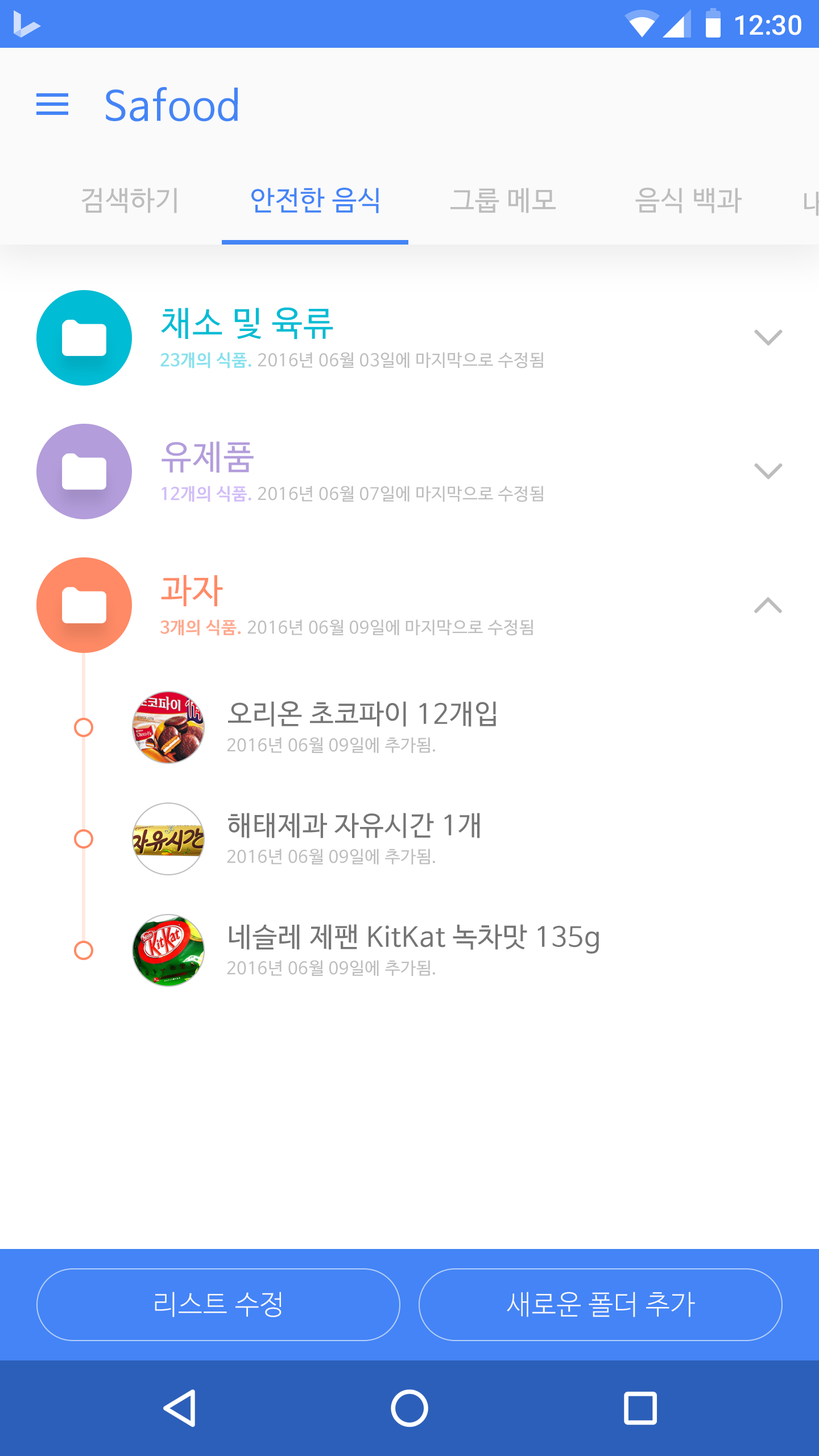
<style>
.page{position:relative;width:819px;height:1456px;background:#ffffff}
.page>*{position:absolute;margin:0}
.t1{font:27.3px "Roboto-Medium";color:#ffffff}
.t2{font:40.9px "NanumBarunGothic";letter-spacing:0.025em;color:#4484f6}
.t3{font:27.3px "NanumBarunGothic";letter-spacing:0.025em;color:#bdbdbd}
.t4{font:27.3px "NanumBarunGothic";letter-spacing:0.025em;color:#4484f6}
.t5{font:34.1px "NanumBarunGothic";letter-spacing:0.025em;color:#00bcd4}
.t6{font:17.1px "NanumBarunGothic";letter-spacing:0.025em;color:#bdbdbd}
.t7{font:17.1px "NanumBarunGothicBold";letter-spacing:0.025em;color:#87e1ed}
.t8{font:34.1px "NanumBarunGothic";letter-spacing:0.025em;color:#b39ddb}
.t9{font:17.1px "NanumBarunGothicBold";letter-spacing:0.025em;color:#d1bdf7}
.t10{font:34.1px "NanumBarunGothic";letter-spacing:0.025em;color:#ff8a65}
.t11{font:17.1px "NanumBarunGothicBold";letter-spacing:0.025em;color:#ffa88d}
.t12{font:27.3px "NanumBarunGothic";letter-spacing:0.025em;color:#757575}
.t13{font:27.3px "NanumBarunGothicLight";letter-spacing:0.025em;color:#fafafa}
</style>
<div class="page">
<p class="t1" style="left:735px;top:15px;width:66px;height:20px">12:30</p>
<p class="t2" style="left:106px;top:87px;width:132px;height:35px">Safood</p>
<p class="t3" style="left:81px;top:188px;width:96px;height:25px">검색하기</p>
<p class="t4" style="left:251px;top:188px;width:128px;height:25px">안전한 음식</p>
<p class="t3" style="left:450px;top:188px;width:106px;height:25px">그룹 메모</p>
<p class="t3" style="left:635px;top:188px;width:107px;height:25px">음식 백과</p>
<p class="t5" style="left:161px;top:307px;width:172px;height:33px">채소 및 육류</p>
<p class="t6" style="left:160px;top:352px;width:383px;height:17px"><span class="t7">23개의 식품. </span>2016년 06월 03일에 마지막으로 수정됨</p>
<p class="t8" style="left:162px;top:441px;width:92px;height:32px">유제품</p>
<p class="t6" style="left:162px;top:486px;width:381px;height:16px"><span class="t9">12개의 식품. </span>2016년 06월 07일에 마지막으로 수정됨</p>
<p class="t10" style="left:161px;top:575px;width:62px;height:31px">과자</p>
<p class="t6" style="left:160px;top:619px;width:373px;height:17px"><span class="t11">3개의 식품. </span>2016년 06월 09일에 마지막으로 수정됨</p>
<p class="t12" style="left:228px;top:701px;width:268px;height:26px">오리온 초코파이 12개입</p>
<p class="t6" style="left:227px;top:737px;width:208px;height:16px">2016년 06월 09일에 추가됨.</p>
<p class="t12" style="left:228px;top:813px;width:252px;height:25px">해태제과 자유시간 1개</p>
<p class="t6" style="left:227px;top:849px;width:208px;height:15px">2016년 06월 09일에 추가됨.</p>
<p class="t12" style="left:229px;top:924px;width:370px;height:30px">네슬레 제팬 KitKat 녹차맛 135g</p>
<p class="t6" style="left:227px;top:960px;width:208px;height:16px">2016년 06월 09일에 추가됨.</p>
<p class="t13" style="left:155px;top:1292px;width:127px;height:25px">리스트 수정</p>
<p class="t13" style="left:507px;top:1292px;width:188px;height:25px">새로운 폴더 추가</p>
</div>
